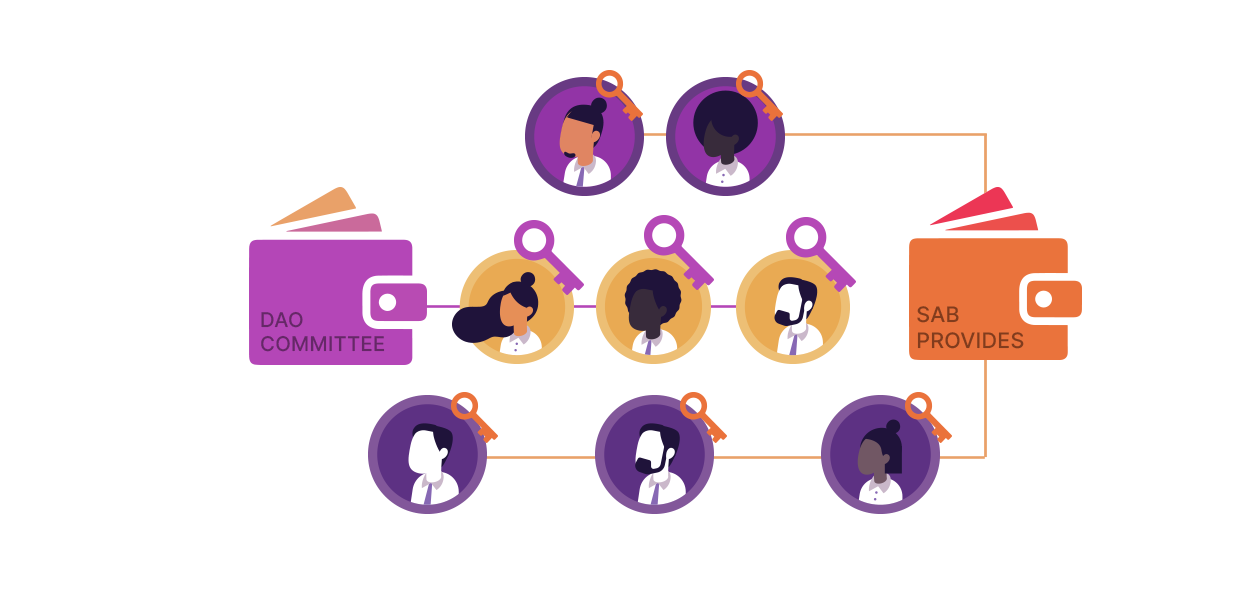
<style>
.page{position:relative;width:1240px;height:600px;background:#ffffff}
.page>*{position:absolute;margin:0}
.t1{font:20.3px "Inter-Medium";color:#652867;text-transform:uppercase}
.t2{font:21.4px "Inter-Medium";color:#813c1d;text-transform:uppercase}
</style>
<div class="page">
<p class="t1" style="left:261px;top:311px;width:124px;height:41px">DAO <br>Committee</p>
<p class="t2" style="left:917px;top:306px;width:107px;height:43px">SAB <br>provides</p>
</div>
